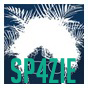
<style>
.page{position:relative;width:88px;height:88px}
.page>*{position:absolute;margin:0}
.t1{font:34px "BigNoodleTitling";color:#0fab8c}
</style>
<div class="page">
<p class="t1" style="left:11px;top:58px;width:65px;height:25px">Sp4zie</p>
</div>
